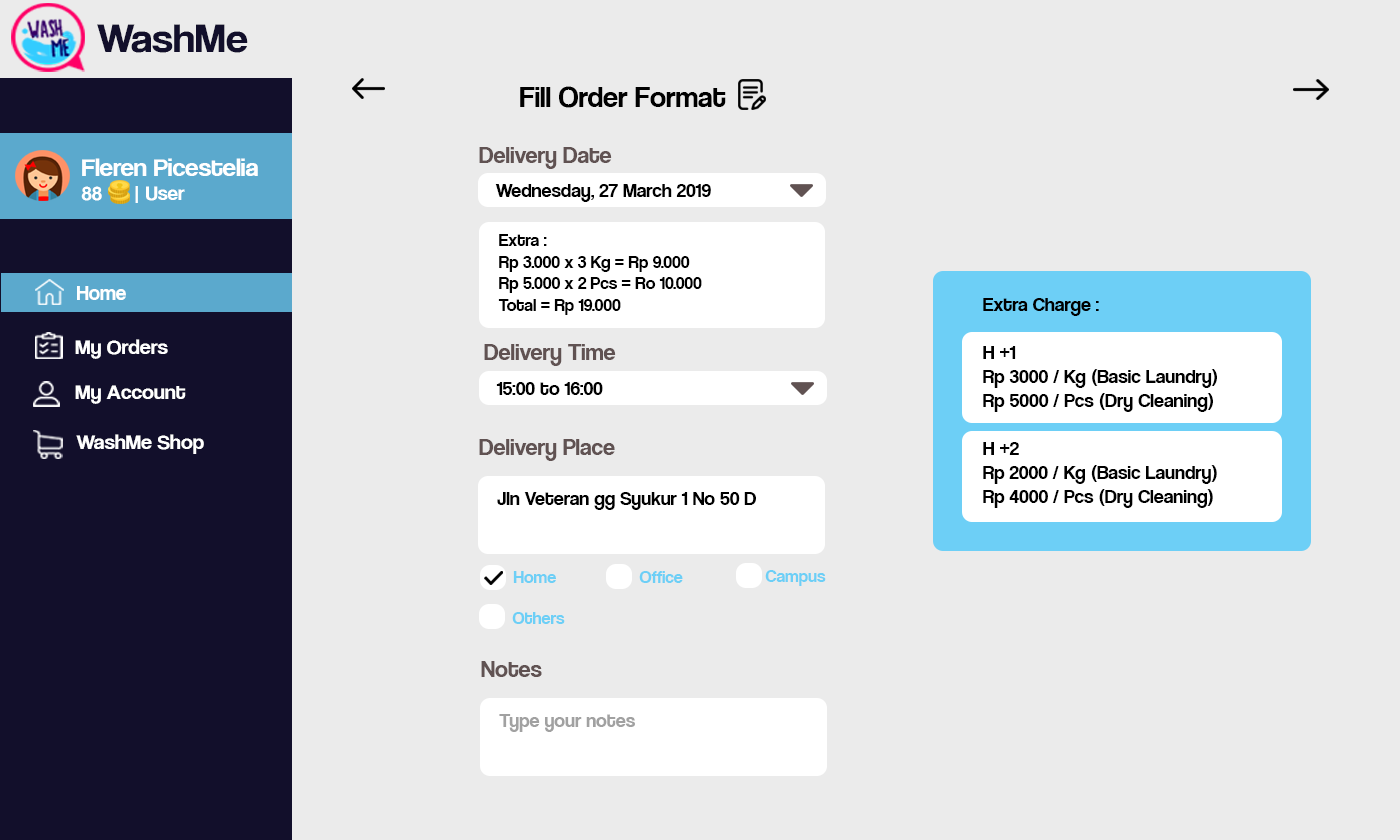
<style>
.page{position:relative;width:1400px;height:840px;background:#ebebeb}
.page>*{position:absolute;margin:0}
.t1{font:42.1px "CoolveticaRg-Regular";color:#120f2b;scale:1.05 1}
.t2{font:30px "CoolveticaRg-Regular";color:#000000}
.t3{font:24px "CoolveticaRg-Regular";color:#605252}
.t4{font:25.2px "CoolveticaRg-Regular";color:#ffffff;scale:1.05 1}
.t5{font:20px "CoolveticaRg-Regular";color:#ffffff;scale:1.05 1}
.t6{font:20px "CoolveticaRg-Regular";color:#000000}
.t7{font:18px "CoolveticaRg-Regular";color:#000000}
.t8{font:21px "CoolveticaRg-Regular";color:#ffffff}
.t9{font:21px "CoolveticaRg-Regular";color:#ffffff;scale:1.05 1}
.t10{font:18px "CoolveticaRg-Regular";color:#6dcff6}
.t11{font:20px "CoolveticaRg-Regular";color:#a1a1a1}
</style>
<div class="page">
<p class="t1" style="left:97px;top:24px;width:151px;height:29px">WashMe</p>
<p class="t2" style="left:520px;top:86px;width:206px;height:22px">Fill Order Format</p>
<p class="t3" style="left:479px;top:147px;width:133px;height:22px">Delivery Date</p>
<p class="t4" style="left:81px;top:158px;width:177px;height:45px">Fleren Picestelia<br><span class="t5">88      | User</span></p>
<p class="t6" style="left:495px;top:184px;width:216px;height:18px">Wednesday, 27 March 2019</p>
<p class="t7" style="left:498px;top:234px;width:204px;height:81px">Extra :<br>Rp 3.000 x 3 Kg = Rp 9.000<br>Rp 5.000 x 2 Pcs = Ro 10.000<br>Total = Rp 19.000</p>
<p class="t8" style="left:77px;top:286px;width:49px;height:14px">Home</p>
<p class="t6" style="left:983px;top:298px;width:234px;height:210px">Extra Charge :<br><br>H +1<br>Rp 3000 / Kg (Basic Laundry) <br>Rp 5000 / Pcs (Dry Cleaning) <br><br>H +2<br>Rp 2000 / Kg (Basic Laundry) <br>Rp 4000 / Pcs (Dry Cleaning)</p>
<p class="t9" style="left:75px;top:339px;width:93px;height:20px">My Orders</p>
<p class="t3" style="left:484px;top:344px;width:132px;height:22px">Delivery Time</p>
<p class="t9" style="left:75px;top:385px;width:111px;height:19px">My Account</p>
<p class="t6" style="left:496px;top:382px;width:107px;height:13px">15:00 to 16:00</p>
<p class="t9" style="left:76px;top:434px;width:128px;height:20px">WashMe Shop</p>
<p class="t3" style="left:479px;top:439px;width:136px;height:22px">Delivery Place</p>
<p class="t6" style="left:497px;top:492px;width:259px;height:18px">Jln Veteran gg Syukur 1 No 50 D</p>
<p class="t10" style="left:513px;top:571px;width:43px;height:12px">Home</p>
<p class="t10" style="left:639px;top:571px;width:44px;height:12px">Office</p>
<p class="t10" style="left:765px;top:570px;width:61px;height:16px">Campus</p>
<p class="t10" style="left:512px;top:612px;width:53px;height:12px">Others</p>
<p class="t3" style="left:481px;top:661px;width:61px;height:16px">Notes</p>
<p class="t11" style="left:499px;top:714px;width:136px;height:18px">Type your notes</p>
</div>
